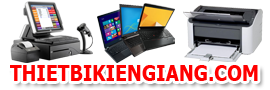
<style>
.page{position:relative;width:270px;height:90px;background:#ffffff}
.page>*{position:absolute;margin:0}
.t1{font:21.5px "Tahoma-Bold";color:#fe0000;scale:0.9 1}
</style>
<div class="page">
<p class="t1" style="left:10px;top:65px;width:248px;height:16px">THIETBIKIENGIANG.COM</p>
</div>
